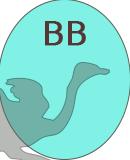
<style>
.page{position:relative;width:130px;height:160px;background:#81f0e5}
.page>*{position:absolute;margin:0}
.t1{font:36.9px "Corbel";color:#563635;font-weight:bold}
</style>
<div class="page">
<p class="t1" style="left:45px;top:21px;width:41px;height:25px">BB</p>
</div>
